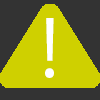
<style>
.page{position:relative;width:100px;height:100px;background:#cfd000}
.page>*{position:absolute;margin:0}
.t1{font:77.9px "KozGoPr6N-Regular";color:#ffffff}
</style>
<div class="page">
<p class="t1" style="left:45px;top:18px;width:9px;height:60px">!</p>
</div>
